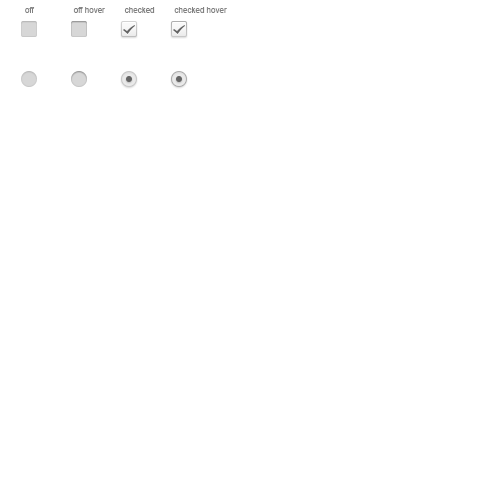
<style>
.page{position:relative;width:500px;height:500px;background:#ffffff}
.page>*{position:absolute;margin:0}
.t1{font:8px "ArialMT";color:#818181}
</style>
<div class="page">
<p class="t1" style="left:25px;top:7px;width:202px;height:6px">off                  off hover         checked         checked hover</p>
</div>
